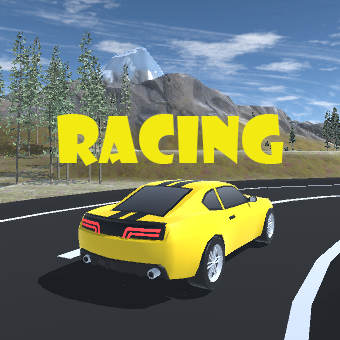
<style>
.page{position:relative;width:340px;height:340px}
.page>*{position:absolute;margin:0}
.t1{font:63.4px "ShowcardGothic-Reg";color:#f2ea10}
</style>
<div class="page">
<p class="t1" style="left:57px;top:114px;width:227px;height:52px">RACING</p>
</div>
